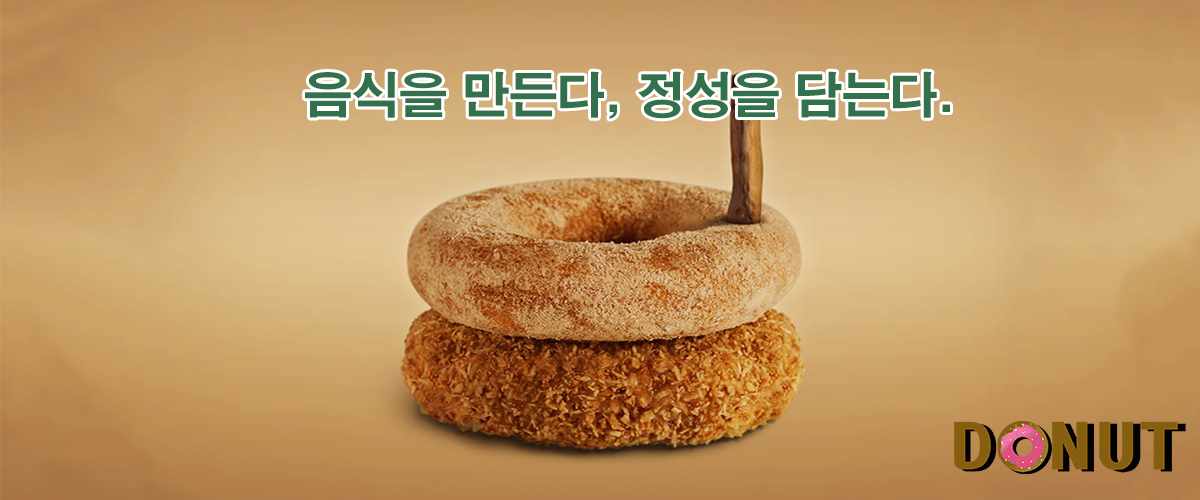
<style>
.page{position:relative;width:1200px;height:500px}
.page>*{position:absolute;margin:0}
.t1{font:48.8px "H2gtrE";letter-spacing:-0.025em;color:#33714d}
</style>
<div class="page">
<p class="t1" style="left:305px;top:71px;width:645px;height:48px">음식을 만든다, 정성을 담는다.</p>
</div>
